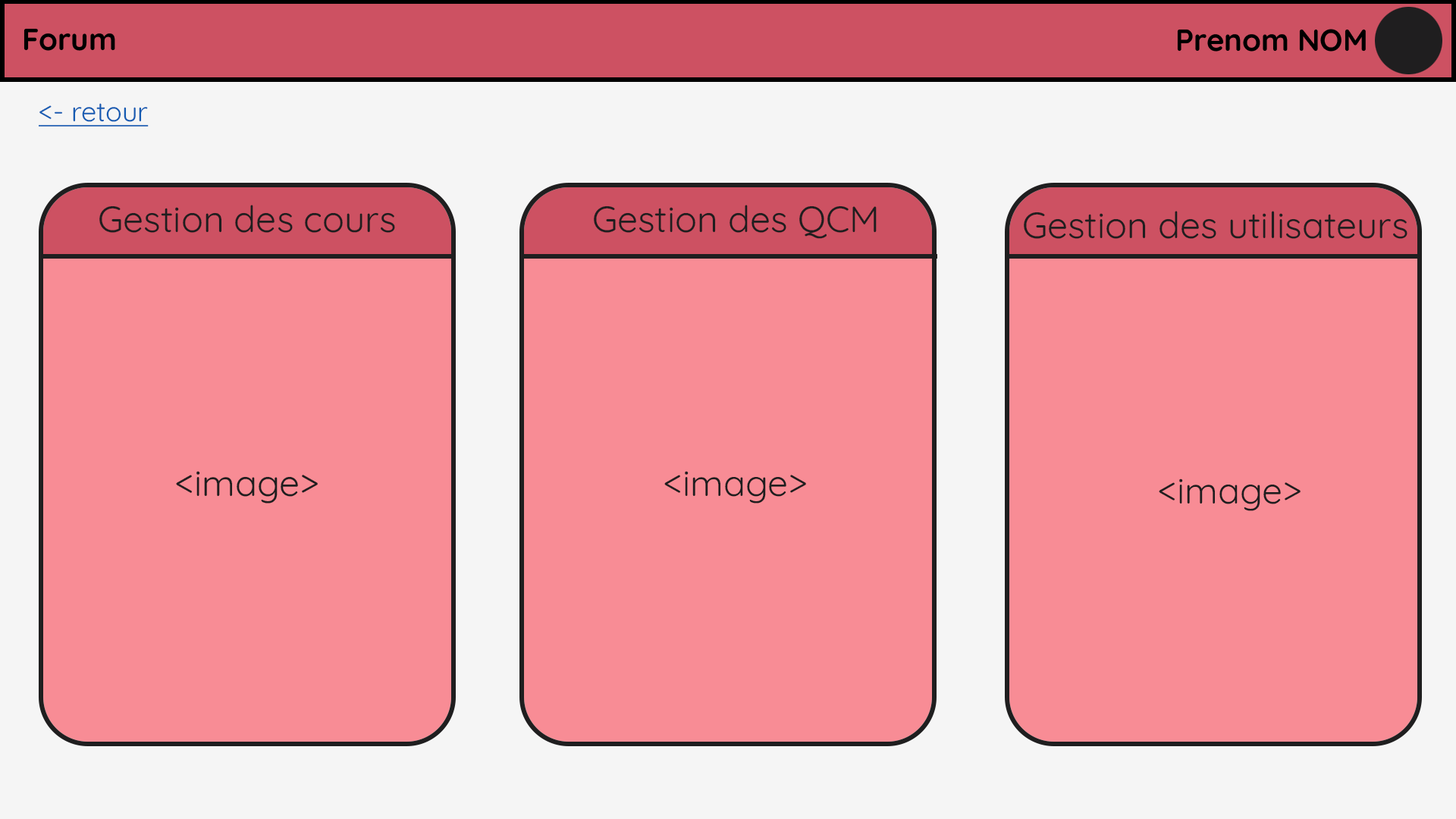
<style>
.page{position:relative;width:1456px;height:819px;background:#f88c95}
.page>*{position:absolute;margin:0}
.t1{font:27.3px "Quicksand-Regular";color:#145bb2;text-decoration:underline}
.t2{font:36.4px "Quicksand-Regular";color:#1f1e1f}
</style>
<div class="page">
<p class="t1" style="left:39px;top:103px;width:110px;height:24px">&lt;- retour</p>
<p class="t2" style="left:99px;top:205px;width:296px;height:28px">Gestion des cours</p>
<p class="t2" style="left:594px;top:205px;width:283px;height:34px">Gestion des QCM</p>
<p class="t2" style="left:1024px;top:211px;width:383px;height:28px">Gestion des utilisateurs</p>
<p class="t2" style="left:176px;top:471px;width:142px;height:33px">&lt;image&gt;</p>
<p class="t2" style="left:664px;top:471px;width:142px;height:33px">&lt;image&gt;</p>
<p class="t2" style="left:1159px;top:479px;width:142px;height:32px">&lt;image&gt;</p>
</div>
